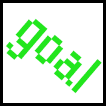
<style>
.page{position:relative;width:106px;height:106px;background:#ffffff}
.page>*{position:absolute;margin:0}
.t1{font:62px "OrangeKid";color:#22e61d}
</style>
<div class="page">
<p class="t1" style="left:5px;top:18px;width:97px;height:76px;rotate:41deg">goal</p>
</div>
